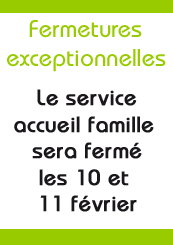
<style>
.page{position:relative;width:173px;height:245px;background:#ffffff}
.page>*{position:absolute;margin:0}
.t1{font:24px "DynameSSK";color:#99cc00}
.t2{font:22px "DynameSSK";color:#1a171b;font-weight:bold}
.t3{font:12px "DynameSSK";color:#1a171b}
</style>
<div class="page">
<p class="t1" style="left:7px;top:20px;width:159px;height:52px;text-align:center">Fermetures<br>exceptionnelles</p>
<p class="t2" style="left:14px;top:89px;width:140px;height:123px;text-align:center"><span class="t3"><br></span>Le service<br>accueil famille <br>sera fermé<br>les 10 et <br>11 février</p>
</div>
